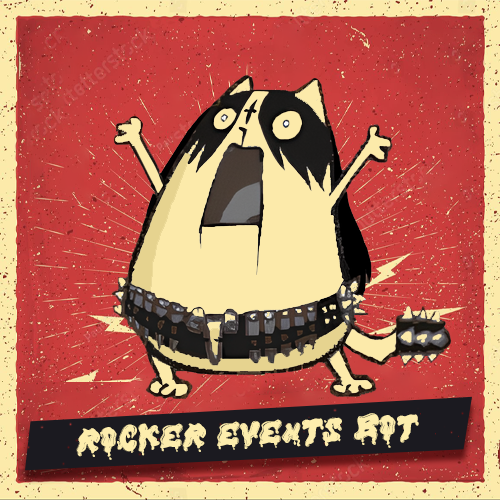
<style>
.page{position:relative;width:500px;height:500px}
.page>*{position:absolute;margin:0}
.t1{font:43px "TaebiscoRegular";color:#fdedad}
</style>
<div class="page">
<p class="t1" style="left:76px;top:413px;width:343px;height:47px;rotate:-2deg">ROCKER EVENTS BOT</p>
</div>
